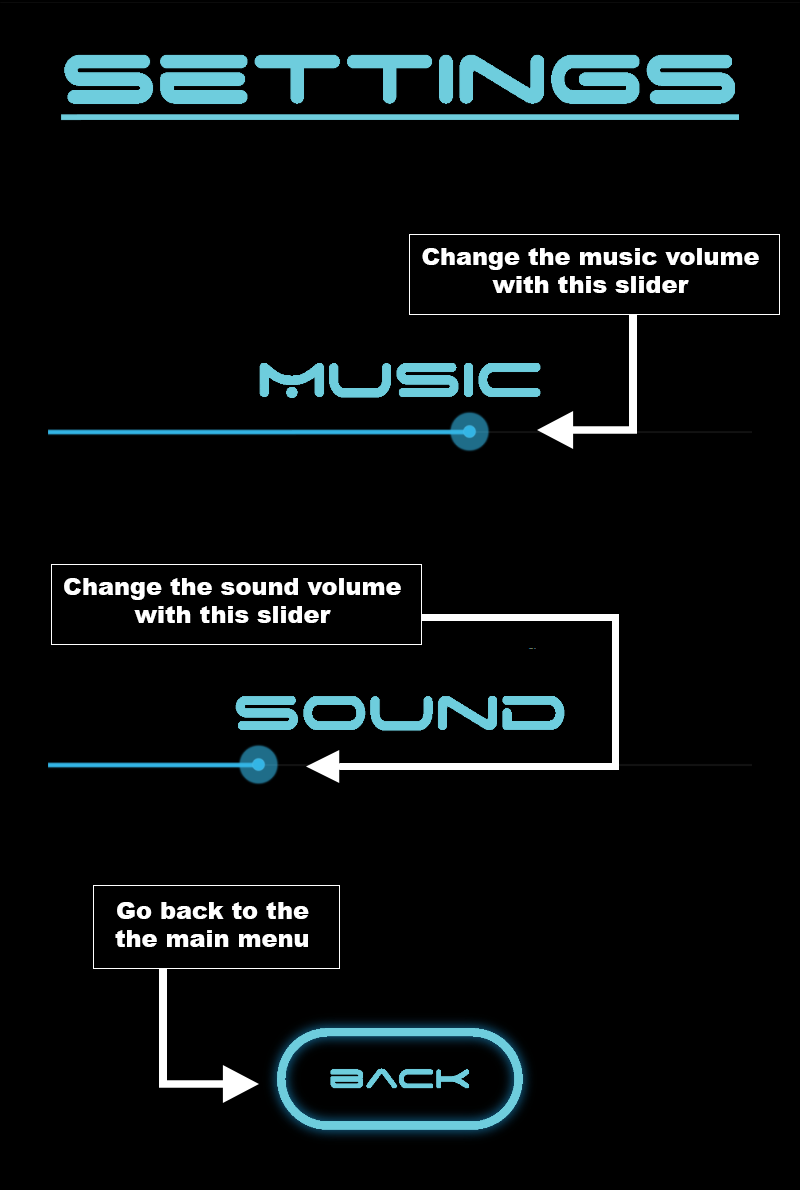
<style>
.page{position:relative;width:800px;height:1190px;background:#000000}
.page>*{position:absolute;margin:0}
.t1{font:24px "Arial-Black";color:#ffffff}
</style>
<div class="page">
<p class="t1" style="left:422px;top:248px;width:337px;height:45px;text-align:center">Change the music volume<br>with this slider</p>
<p class="t1" style="left:64px;top:578px;width:337px;height:45px;text-align:center">Change the sound volume<br>with this slider</p>
<p class="t1" style="left:115px;top:902px;width:194px;height:45px;text-align:center">Go back to the<br>the main menu</p>
</div>
